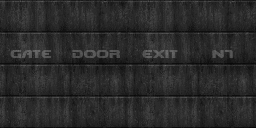
<style>
.page{position:relative;width:256px;height:128px}
.page>*{position:absolute;margin:0}
.t1{font:10px "DooM";color:#595959}
.t2{font:10px "DooM";color:#545454}
.t3{font:10px "DooM";color:#5e5e5e}
.t4{font:10px "DooM";color:#565656}
</style>
<div class="page">
<p class="t1" style="left:10px;top:50px;width:41px;height:8px">GATE</p>
<p class="t2" style="left:72px;top:50px;width:48px;height:8px">DOOR</p>
<p class="t3" style="left:142px;top:50px;width:36px;height:8px">EXIT</p>
<p class="t4" style="left:212px;top:50px;width:21px;height:8px">N7</p>
</div>
